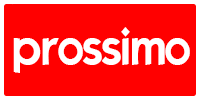
<style>
.page{position:relative;width:200px;height:100px;background:#ff0000}
.page>*{position:absolute;margin:0}
.t1{font:48px "ELEGANCE";color:#ffffff}
</style>
<div class="page">
<p class="t1" style="left:13px;top:27px;width:177px;height:46px">prossimo</p>
</div>
